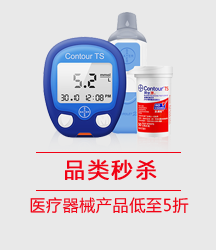
<style>
.page{position:relative;width:216px;height:250px;background:#e9e9e9}
.page>*{position:absolute;margin:0}
.t1{font:21px "MicrosoftYaHei";letter-spacing:0.12em;color:#f10214;font-weight:bold}
.t2{font:16.1px "MicrosoftYaHei";letter-spacing:0.04em;color:#f10214}
</style>
<div class="page">
<p class="t1" style="left:65px;top:159px;width:92px;height:22px">品类秒杀</p>
<p class="t2" style="left:30px;top:197px;width:159px;height:17px">医疗器械产品低至5折</p>
</div>
